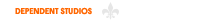
<style>
.page{position:relative;width:200px;height:20px;background:#ffffff}
.page>*{position:absolute;margin:0}
.t1{font:8px "Atlanta-Demi";color:#ff6600}
</style>
<div class="page">
<p class="t1" style="left:15px;top:7px;width:77px;height:8px">DEPENDENT STUDIOS</p>
</div>
